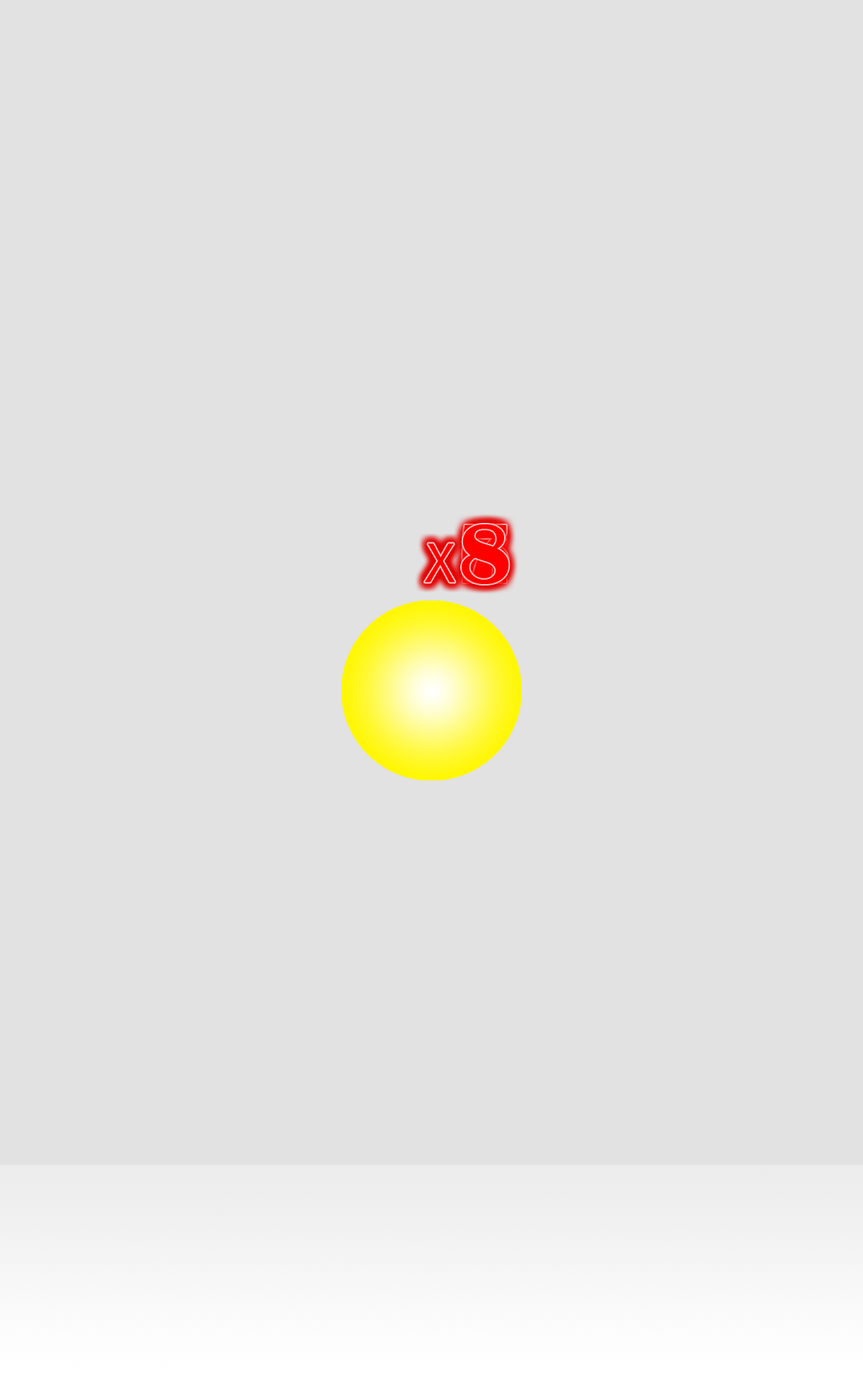
<style>
.page{position:relative;width:863px;height:1381px;background:#e2e2e2}
.page>*{position:absolute;margin:0}
.t1{font:71.9px "HGGothicM";color:#fe0000}
.t2{font:86.3px "BritannicBold";color:#fe0000}
</style>
<div class="page">
<p class="t1" style="left:424px;top:524px;width:83px;height:59px">x<span class="t2">2</span></p>
<p class="t1" style="left:424px;top:524px;width:83px;height:59px">x<span class="t2">3</span></p>
<p class="t1" style="left:424px;top:525px;width:83px;height:58px">x<span class="t2">4</span></p>
<p class="t1" style="left:424px;top:525px;width:83px;height:58px">x<span class="t2">5</span></p>
<p class="t1" style="left:424px;top:524px;width:85px;height:59px">x<span class="t2">6</span></p>
<p class="t1" style="left:424px;top:525px;width:82px;height:58px">x<span class="t2">7</span></p>
<p class="t1" style="left:424px;top:524px;width:85px;height:60px">x<span class="t2">8</span></p>
</div>
